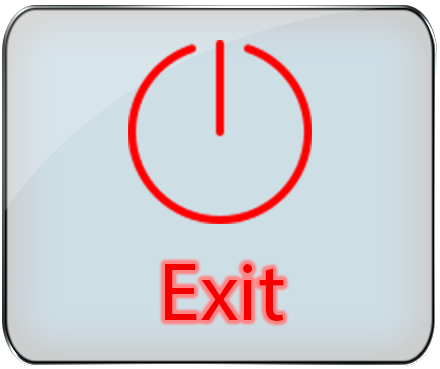
<style>
.page{position:relative;width:440px;height:369px;background:#cddee5}
.page>*{position:absolute;margin:0}
.t1{font:83.2px "MyriadPro-Regular";color:#f50000}
</style>
<div class="page">
<p class="t1" style="left:165px;top:264px;width:119px;height:57px">Exit</p>
</div>
